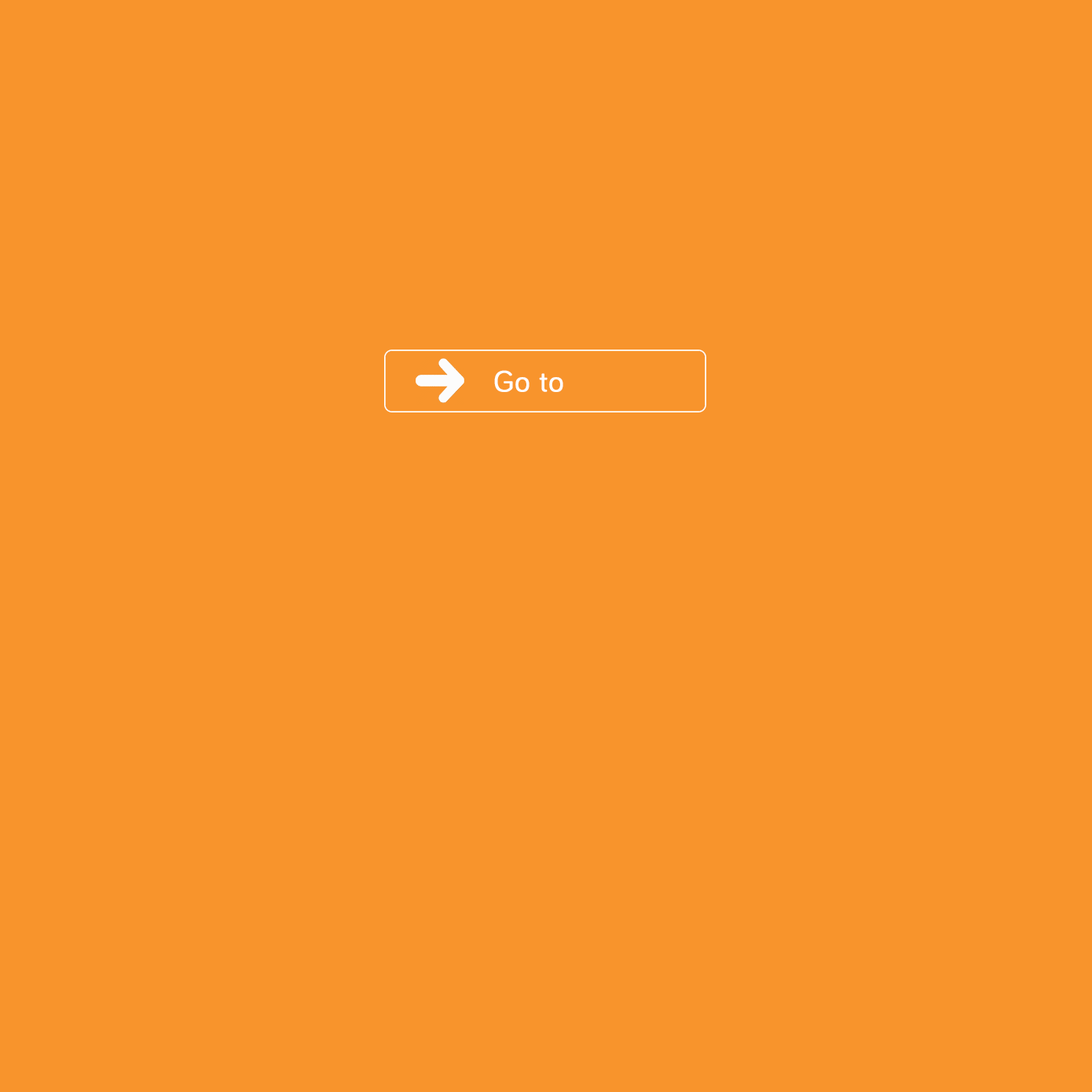
<style>
.page{position:relative;width:1092px;height:1092px;background:#f8942c}
.page>*{position:absolute;margin:0}
.t1{font:30.1px "Bariol-Regular";letter-spacing:0.01em;color:#fefefe;font-weight:bold}
</style>
<div class="page">
<p class="t1" style="left:494px;top:370px;width:69px;height:22px">Go to</p>
</div>
